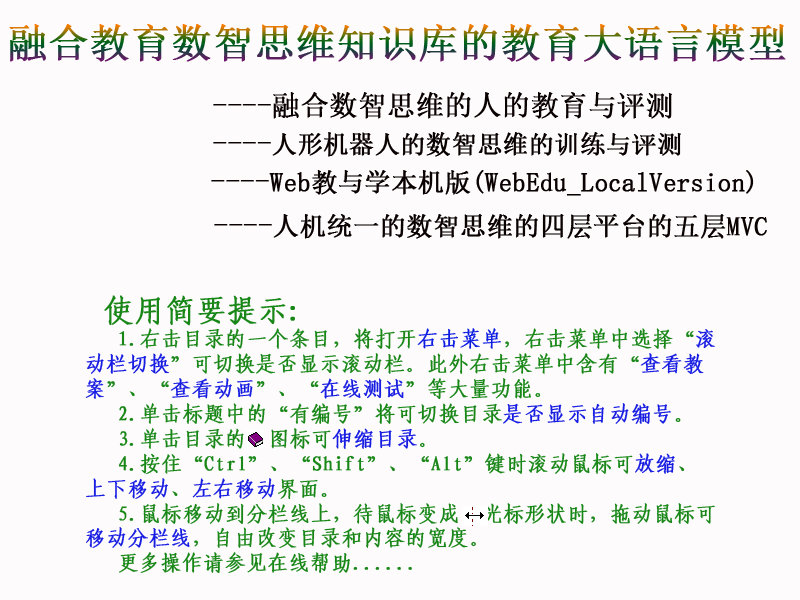
<style>
.page{position:relative;width:800px;height:600px;background:#fdfbfb}
.page>*{position:absolute;margin:0}
.t1{font:40px "SimSun";font-weight:bold}
.t2{font:28px "SimSun";color:#0a0101;font-weight:bold}
.t3{font:25px "SimSun";color:#0a0101;font-weight:bold}
.t4{font:26px "SimSun";color:#0a0101;font-weight:bold}
.t5{font:20.8px "FangSong_GB2312";color:#188718;font-weight:bold}
.t6{font:36px "FangSong_GB2312";color:#188718;font-weight:bold}
.t7{font:30px "FangSong_GB2312";color:#188718;font-weight:bold}
.t8{font:20.8px "FangSong_GB2312";color:#0e1de2;font-weight:bold}
.t9{font:20.8px "FangSong_GB2312";color:#181de2;font-weight:bold}
</style>
<div class="page">
<p class="t1" style="left:9px;top:24px;width:777px;height:38px">融合教育数智思维知识库的教育大语言模型</p>
<p class="t2" style="left:213px;top:92px;width:459px;height:27px">----融合数智思维的人的教育与评测</p>
<p class="t3" style="left:213px;top:132px;width:468px;height:25px"><span class="t2">----</span>人形机器人的数智思维的训练与评测</p>
<p class="t4" style="left:211px;top:170px;width:543px;height:26px"><span class="t2">----</span>Web教与学本机版(WebEdu_LocalVersion)</p>
<p class="t4" style="left:214px;top:214px;width:553px;height:25px"><span class="t2">----</span>人机统一的数智思维的四层平台的五层MVC</p>
<p class="t5" style="left:85px;top:295px;width:630px;height:279px"><span class="t6"> </span><span class="t7">使用简要提示:<br></span>   1.右击目录的一个条目，将打开<span class="t8">右击菜单</span>，右击菜单中选择“<span class="t9">滚动栏切换</span>”可切换是否显示滚动栏。此外右击菜单中含有“<span class="t9">查看教案</span>”、“<span class="t9">查看动画</span>”、“<span class="t9">在线测试</span>”等大量功能。<br>   2.单击标题中的“有编号”将可切换目录<span class="t9">是否显示自动编号</span>。<br>   3.单击目录的  图标可<span class="t9">伸缩目录</span>。<br>   4.按住“Ctrl”、“Shift”、“Alt”键时滚动鼠标可<span class="t9">放缩</span>、<span class="t9">上下移动</span>、<span class="t9">左右移动</span>界面。  <br>   5.鼠标移动到分栏线上，待鼠标变成  光标形状时，拖动鼠标可<span class="t9">移动分栏线</span>，自由改变目录和内容的宽度。<br>   更多操作请参见在线帮助......</p>
</div>
